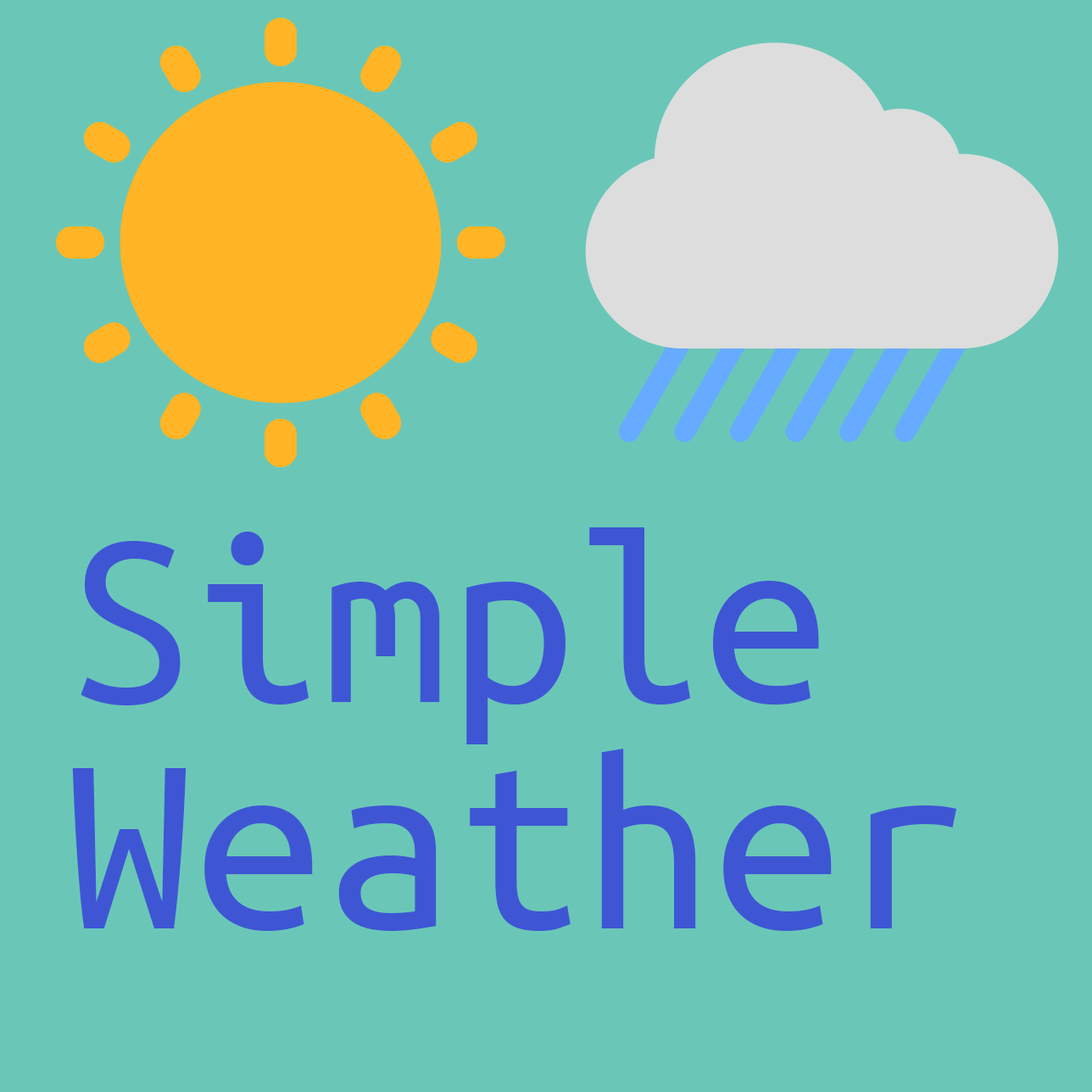
<style>
.page{position:relative;width:1092px;height:1092px;background:#6ac7b7}
.page>*{position:absolute;margin:0}
.t1{font:254.3px "UbuntuMono-Regular";color:#3e56d4}
.t2{font:259.4px "UbuntuMono-Regular";color:#3e56d4}
</style>
<div class="page">
<p class="t1" style="left:81px;top:527px;width:738px;height:217px">Simple</p>
<p class="t2" style="left:72px;top:749px;width:885px;height:182px">Weather</p>
</div>
